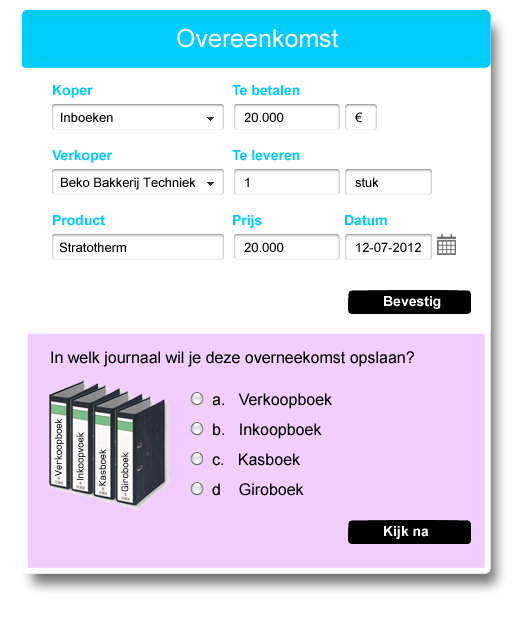
<style>
.page{position:relative;width:512px;height:635px;background:#ffffff}
.page>*{position:absolute;margin:0}
.t1{font:25px "ArialMT";color:#ffffff}
.t2{font:14px "Arial-BoldMT";color:#00ccff}
.t3{font:13px "ArialMT";color:#000000}
.t4{font:14px "Arial-BoldMT";color:#ffffff}
.t5{font:16px "ArialMT";color:#000000}
.t6{font:16px/30px "ArialMT";color:#000000}
.t7{font:10px "FoundryMonoline-Medium"}
.t8{font:10px "Verdana-Bold"}
.t9{font:10px "FoundryMonoline-Medium";color:#000000}
.t10{font:10px "Verdana-Bold";color:#000000}
</style>
<div class="page">
<p class="t1" style="left:177px;top:28px;width:162px;height:20px">Overeenkomst</p>
<p class="t2" style="left:53px;top:85px;width:40px;height:13px">Koper</p>
<p class="t2" style="left:232px;top:85px;width:68px;height:11px">Te betalen</p>
<p class="t3" style="left:244px;top:112px;width:40px;height:10px">20.000</p>
<p class="t2" style="left:52px;top:150px;width:61px;height:13px">Verkoper</p>
<p class="t2" style="left:232px;top:150px;width:68px;height:11px">Te leveren</p>
<p class="t2" style="left:53px;top:215px;width:52px;height:11px">Product</p>
<p class="t2" style="left:233px;top:215px;width:29px;height:13px">Prijs</p>
<p class="t2" style="left:345px;top:215px;width:42px;height:11px">Datum</p>
<p class="t3" style="left:59px;top:242px;width:67px;height:11px">Stratotherm</p>
<p class="t3" style="left:244px;top:242px;width:40px;height:10px">20.000</p>
<p class="t4" style="left:384px;top:296px;width:57px;height:13px">Bevestig</p>
<p class="t5" style="left:51px;top:351px;width:363px;height:16px">In welk journaal wil je deze overneekomst opslaan?</p>
<p class="t6" style="left:212px;top:393px;width:120px;height:103px">a.   Verkoopboek<br>b.   Inkoopboek<br>c.   Kasboek<br>d    Giroboek</p>
<p class="t7" style="left:54px;top:418px;width:10px;height:58px;rotate:-90deg"><span class="t8"><br></span>Verkoopboek</p>
<p class="t9" style="left:76px;top:432px;width:10px;height:48px;rotate:-90deg"><span class="t10"><br></span>Inkoopvoek</p>
<p class="t9" style="left:98px;top:449px;width:8px;height:37px;rotate:-90deg"><span class="t10"><br></span>Kasboek</p>
<p class="t9" style="left:121px;top:452px;width:8px;height:40px;rotate:-90deg"><span class="t10"><br></span>Giroboek</p>
<p class="t4" style="left:384px;top:526px;width:45px;height:13px">Kijk na</p>
</div>
